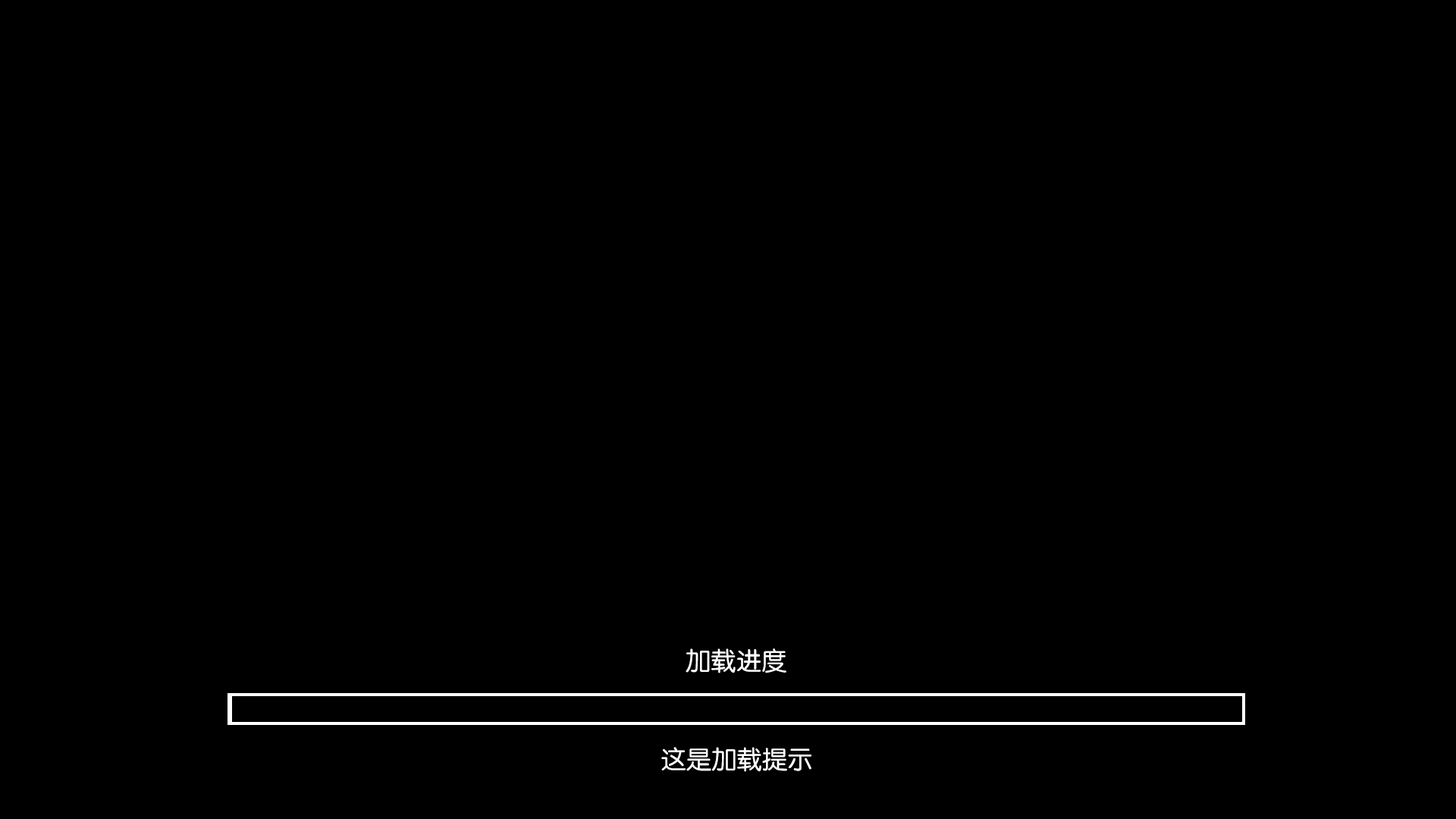
<style>
.page{position:relative;width:1456px;height:819px;background:#000000}
.page>*{position:absolute;margin:0}
.t1{font:25.3px "FZY3K--GBK1-0";color:#ffffff}
</style>
<div class="page">
<p class="t1" style="left:686px;top:648px;width:100px;height:25px">加载进度</p>
<p class="t1" style="left:661px;top:747px;width:150px;height:25px">这是加载提示</p>
</div>
